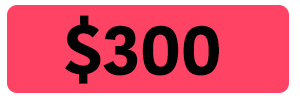
<style>
.page{position:relative;width:300px;height:100px;background:#fe4365}
.page>*{position:absolute;margin:0}
.t1{font:72px "KohinoorDevanagari-Bold";color:#030303}
</style>
<div class="page">
<p class="t1" style="left:65px;top:15px;width:154px;height:69px">$300</p>
</div>
